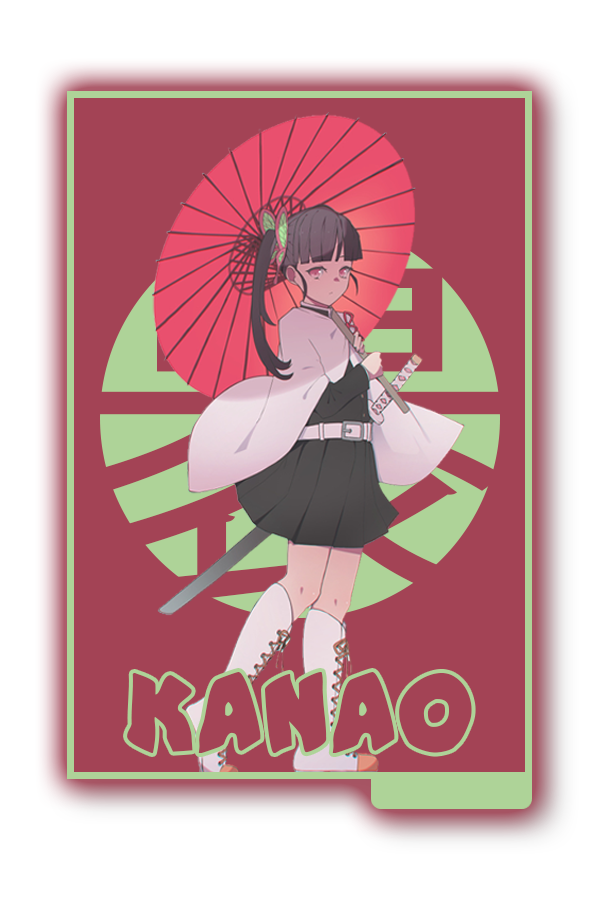
<style>
.page{position:relative;width:600px;height:900px;background:#a34355}
.page>*{position:absolute;margin:0}
.t1{font:113px "#44Font";color:#a34355}
</style>
<div class="page">
<p class="t1" style="left:127px;top:672px;width:345px;height:81px">Kanao</p>
</div>
